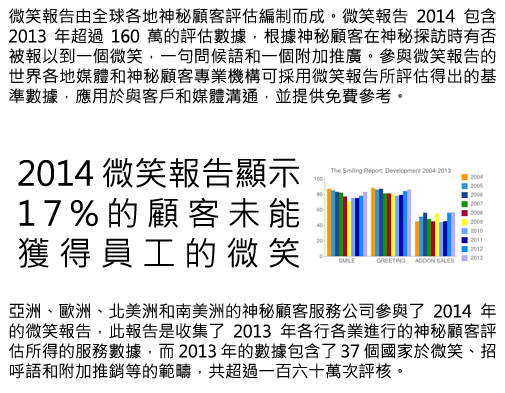
<style>
.page{position:relative;width:505px;height:393px;background:#ffffff}
.page>*{position:absolute;margin:0}
.t1{font:16.7px "MicrosoftJhengHeiRegular";color:#000000}
.t2{font:33.3px "MicrosoftJhengHeiRegular";color:#000000}
</style>
<div class="page">
<p class="t1" style="left:9px;top:8px;width:487px;height:96px;text-align:justify">微笑報告由全球各地神秘顧客評估編制而成。微笑報告 2014 包含 2013 年超過 160 萬的評估數據，根據神秘顧客在神秘探訪時有否被報以到一個微笑，一句問候語和一個附加推廣。參與微笑報告的世界各地媒體和神秘顧客專業機構可採用微笑報告所評估得出的基準數據，應用於與客戶和媒體溝通，並提供免費參考。</p>
<p class="t2" style="left:18px;top:157px;width:282px;height:111px;text-align:justify">2014 微笑報告顯示<br>17%的顧客未能<br>獲得員工的微笑</p>
<p class="t1" style="left:9px;top:303px;width:487px;height:76px;text-align:justify">亞洲、歐洲、北美洲和南美洲的神秘顧客服務公司參與了 2014 年的微笑報告，此報告是收集了 2013 年各行各業進行的神秘顧客評估所得的服務數據，而 2013 年的數據包含了 37 個國家於微笑、招呼語和附加推銷等的範疇，共超過一百六十萬次評核。</p>
</div>
